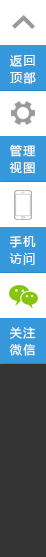
<style>
.page{position:relative;width:46px;height:557px;background:#333333}
.page>*{position:absolute;margin:0}
.t1{font:12px/17px "MicrosoftYaHei";letter-spacing:0.12em;color:#ffffff}
</style>
<div class="page">
<p class="t1" style="left:9px;top:144px;width:27px;height:30px">管理<br>视图</p>
<p class="t1" style="left:9px;top:236px;width:27px;height:29px">手机<br>访问</p>
<p class="t1" style="left:9px;top:327px;width:27px;height:29px">关注<br>微信</p>
</div>
